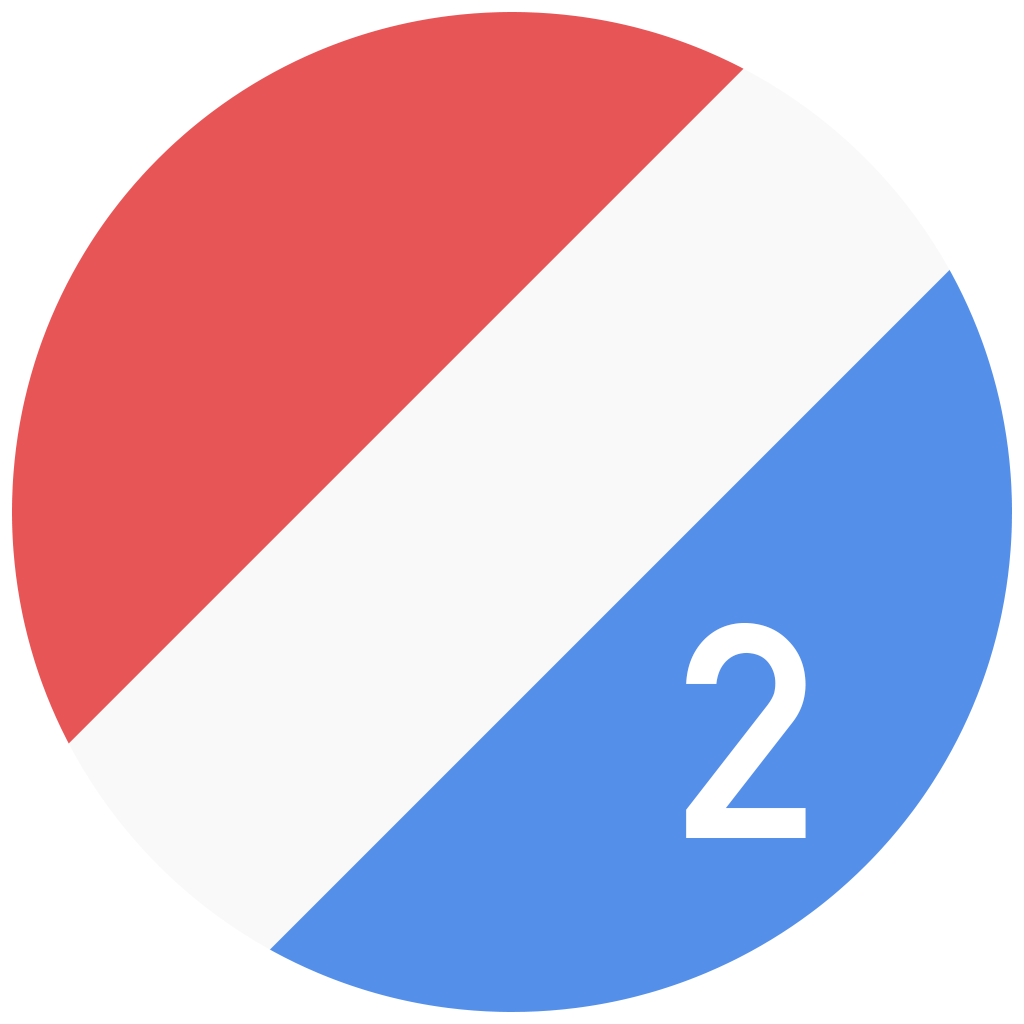
<style>
.page{position:relative;width:1024px;height:1024px;background:#f9f9f9}
.page>*{position:absolute;margin:0}
.t1{font:300px "DINAlternate-Bold";color:#ffffff}
</style>
<div class="page">
<p class="t1" style="left:686px;top:623px;width:120px;height:215px">2</p>
</div>
